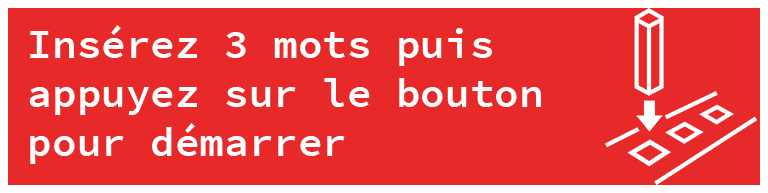
<style>
.page{position:relative;width:768px;height:193px;background:#e72929}
.page>*{position:absolute;margin:0}
.t1{font:41px "SourceCodePro-Semibold";color:#ffffff}
</style>
<div class="page">
<p class="t1" style="left:29px;top:25px;width:512px;height:139px">Insérez 3 mots puis<br>appuyez sur le bouton<br>pour démarrer</p>
</div>
